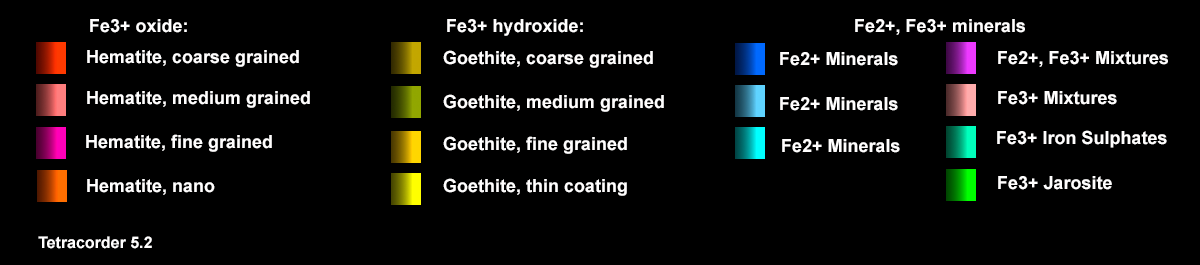
<style>
.page{position:relative;width:1200px;height:265px;background:#000000}
.page>*{position:absolute;margin:0}
.t1{font:18px "Arial-BoldMT";color:#fffefe}
.t2{font:16px "Arial-BoldMT";color:#fffefe}
</style>
<div class="page">
<p class="t1" style="left:90px;top:19px;width:97px;height:14px">Fe3+ oxide:</p>
<p class="t1" style="left:447px;top:19px;width:136px;height:17px">Fe3+ hydroxide:</p>
<p class="t1" style="left:855px;top:19px;width:170px;height:16px">Fe2+, Fe3+ minerals</p>
<p class="t1" style="left:87px;top:50px;width:212px;height:17px">Hematite, coarse grained</p>
<p class="t1" style="left:443px;top:50px;width:210px;height:18px">Goethite, coarse grained</p>
<p class="t1" style="left:780px;top:52px;width:118px;height:14px">Fe2+ Minerals</p>
<p class="t1" style="left:998px;top:51px;width:170px;height:16px">Fe2+, Fe3+ Mixtures</p>
<p class="t1" style="left:87px;top:91px;width:223px;height:17px">Hematite, medium grained</p>
<p class="t1" style="left:443px;top:94px;width:221px;height:18px">Goethite, medium grained</p>
<p class="t1" style="left:780px;top:97px;width:118px;height:14px">Fe2+ Minerals</p>
<p class="t1" style="left:998px;top:91px;width:119px;height:14px">Fe3+ Mixtures</p>
<p class="t1" style="left:86px;top:134px;width:186px;height:18px">Hematite, fine grained</p>
<p class="t1" style="left:443px;top:136px;width:184px;height:18px">Goethite, fine grained</p>
<p class="t1" style="left:997px;top:130px;width:170px;height:18px">Fe3+ Iron Sulphates</p>
<p class="t1" style="left:782px;top:139px;width:118px;height:14px">Fe2+ Minerals</p>
<p class="t1" style="left:87px;top:179px;width:128px;height:16px">Hematite, nano</p>
<p class="t1" style="left:443px;top:178px;width:184px;height:18px">Goethite, thin coating</p>
<p class="t1" style="left:998px;top:176px;width:114px;height:14px">Fe3+ Jarosite</p>
<p class="t2" style="left:38px;top:236px;width:114px;height:13px">Tetracorder 5.2</p>
</div>
